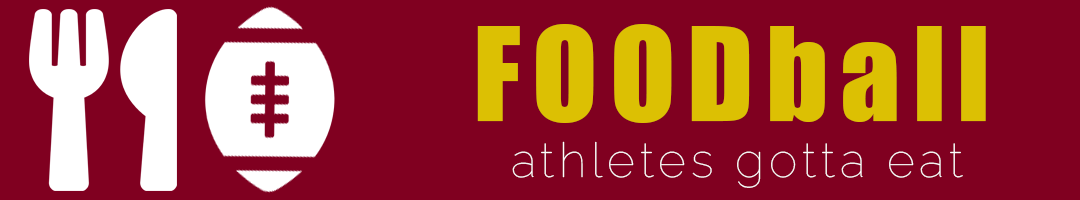
<style>
.page{position:relative;width:1080px;height:200px;background:#800020}
.page>*{position:absolute;margin:0}
.t1{font:120px "Impact";letter-spacing:0.1em;color:#dcc003}
.t2{font:48px "Raleway-Thin";letter-spacing:0.1em;color:#ffffff}
</style>
<div class="page">
<p class="t1" style="left:477px;top:24px;width:509px;height:99px">FOODball</p>
<p class="t2" style="left:512px;top:141px;width:451px;height:47px">athletes gotta eat</p>
</div>
